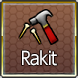
<style>
.page{position:relative;width:78px;height:78px}
.page>*{position:absolute;margin:0}
.t1{font:18px "UDShinGoPro-Regular";letter-spacing:-0.04em;color:#ffffff;scale:0.9 1}
</style>
<div class="page">
<p class="t1" style="left:22px;top:50px;width:35px;height:16px">Rakit</p>
</div>
